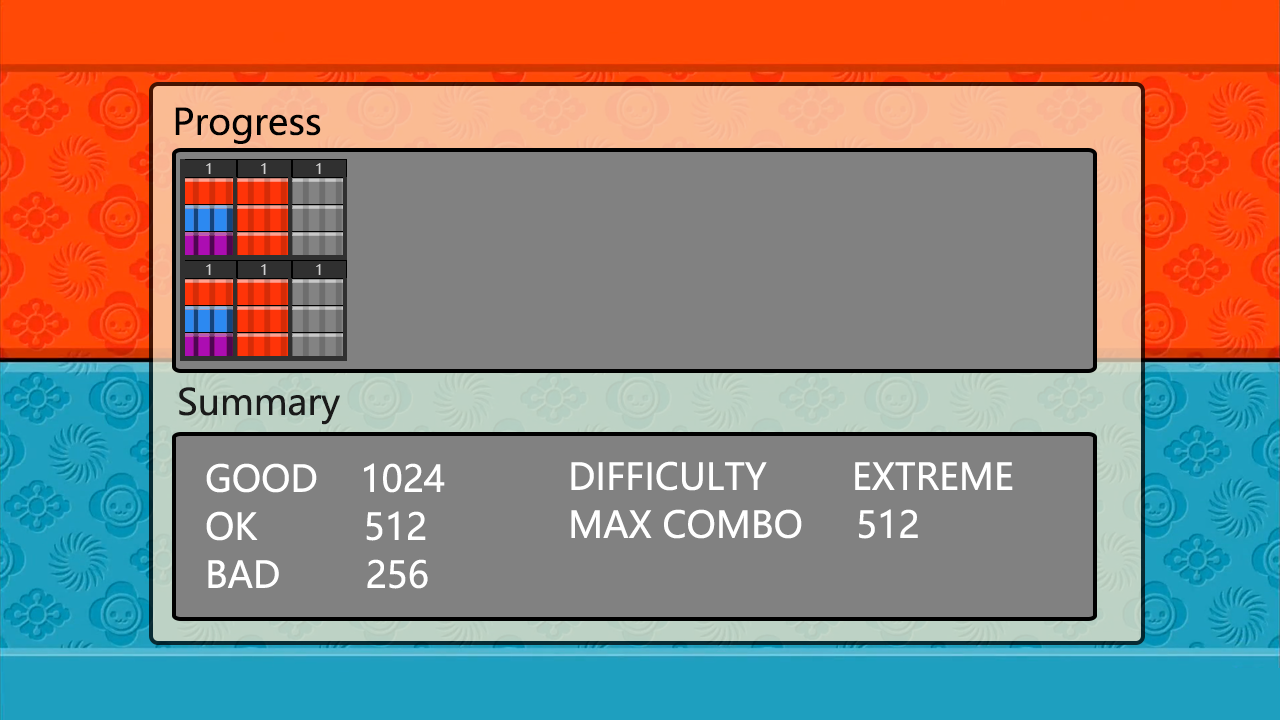
<style>
.page{position:relative;width:1280px;height:720px;background:#818181}
.page>*{position:absolute;margin:0}
.t1{font:36px "MicrosoftYaHei";color:#000000}
.t2{font:14px "MicrosoftYaHei";color:#d0d0d0}
.t3{font:36px "MicrosoftYaHei";color:#1a1a1a}
.t4{font:36.4px/48px "MicrosoftYaHei";color:#ffffff}
</style>
<div class="page">
<p class="t1" style="left:175px;top:107px;width:146px;height:37px">Progress</p>
<p class="t2" style="left:206px;top:163px;width:5px;height:11px">1</p>
<p class="t2" style="left:261px;top:163px;width:5px;height:11px">1</p>
<p class="t2" style="left:316px;top:163px;width:5px;height:11px">1</p>
<p class="t2" style="left:206px;top:264px;width:5px;height:11px">1</p>
<p class="t2" style="left:261px;top:264px;width:5px;height:11px">1</p>
<p class="t2" style="left:316px;top:264px;width:5px;height:11px">1</p>
<p class="t3" style="left:179px;top:387px;width:161px;height:38px">Summary</p>
<p class="t4" style="left:571px;top:461px;width:442px;height:78px;text-align:justify">DIFFICULTY        EXTREME<br>MAX COMBO     512</p>
<p class="t4" style="left:206px;top:463px;width:239px;height:126px;text-align:justify">GOOD    1024<br>OK          512<br>BAD        256</p>
</div>
